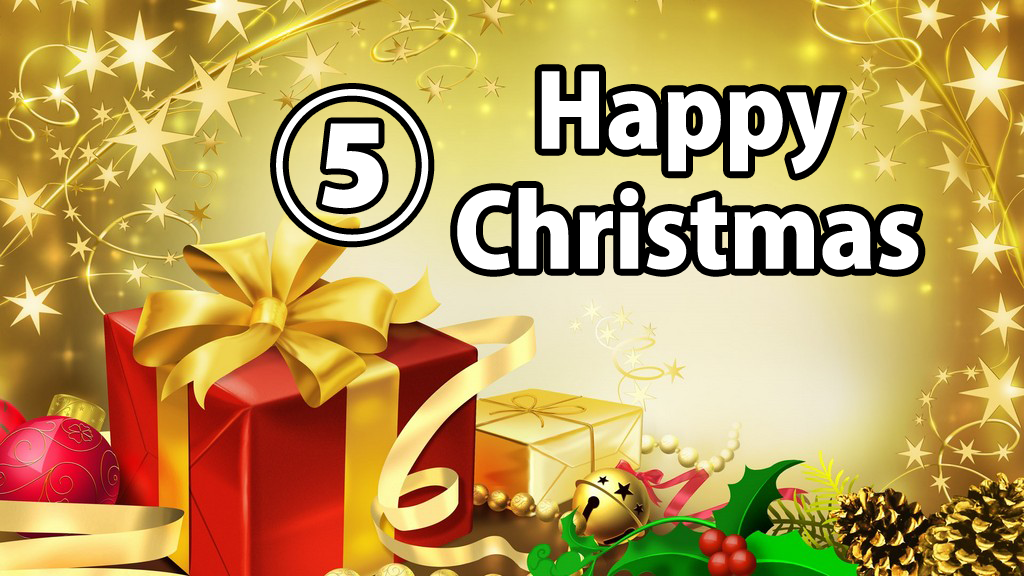
<style>
.page{position:relative;width:1024px;height:576px}
.page>*{position:absolute;margin:0}
.t1{font:100px "KozGoPr6N-Heavy";color:#ffffff}
.t2{font:160px "KozGoPr6N-Heavy";color:#ffffff}
</style>
<div class="page">
<p class="t1" style="left:457px;top:71px;width:462px;height:199px;text-align:center">Happy <br>Christmas</p>
<p class="t2" style="left:276px;top:89px;width:153px;height:153px">⑤</p>
</div>
